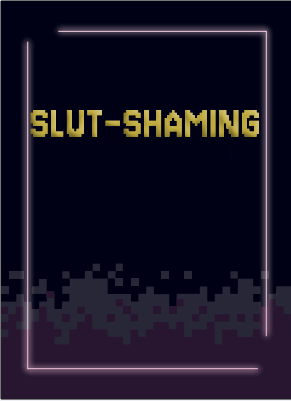
<style>
.page{position:relative;width:291px;height:401px;background:#000115}
.page>*{position:absolute;margin:0}
.t1{font:50px "Jersey10-Regular";letter-spacing:0.025em;scale:0.9 1}
</style>
<div class="page">
<p class="t1" style="left:30px;top:109px;width:229px;height:28px">SLUT-SHAMING</p>
</div>
